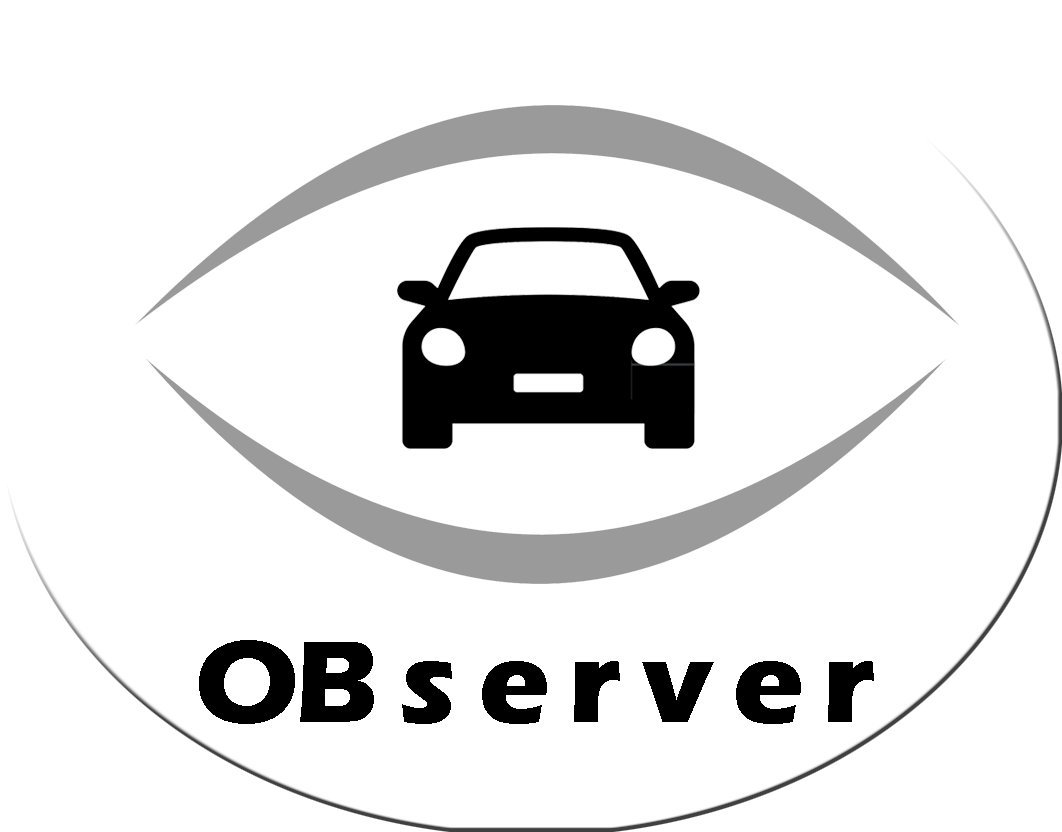
<style>
.page{position:relative;width:1062px;height:832px;background:#ffffff}
.page>*{position:absolute;margin:0}
.t1{font:120px "ErasITC-Bold";letter-spacing:-0.04em;color:#000000}
</style>
<div class="page">
<p class="t1" style="left:199px;top:640px;width:675px;height:84px">OB s e r v e r</p>
</div>
